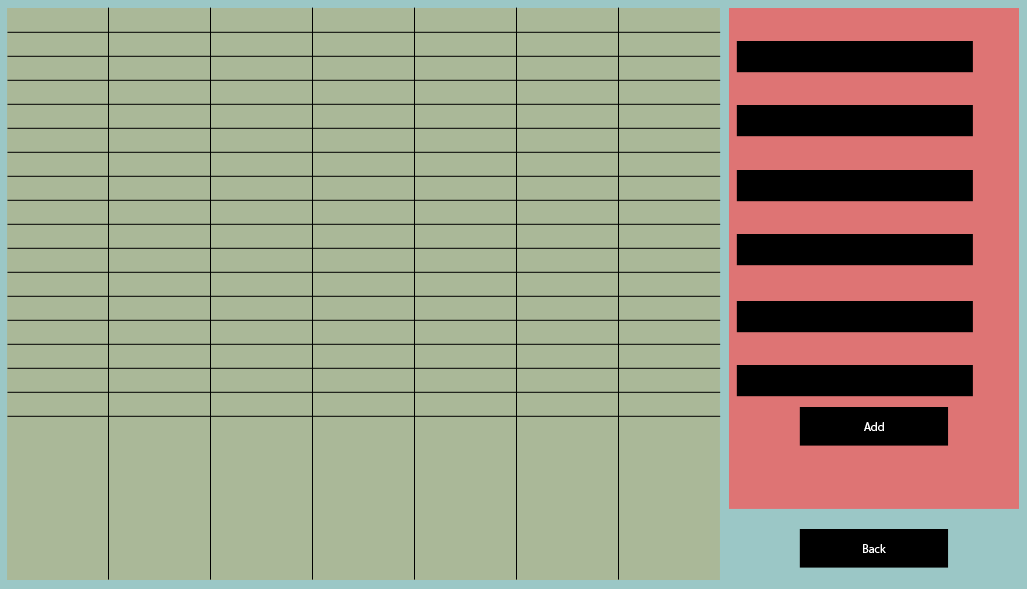
<style>
.page{position:relative;width:1027px;height:589px;background:#aab898}
.page>*{position:absolute;margin:0}
.t1{font:12px "MyriadPro-Regular";color:#ffffff}
</style>
<div class="page">
<p class="t1" style="left:864px;top:422px;width:20px;height:9px">Add</p>
<p class="t1" style="left:863px;top:544px;width:23px;height:9px">Back</p>
</div>
